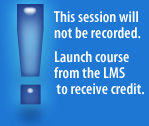
<style>
.page{position:relative;width:149px;height:126px;background:#1e77d3}
.page>*{position:absolute;margin:0}
.t1{font:16px/16px "MyriadPro-SemiboldCond";letter-spacing:0.005em;color:#ffffff}
</style>
<div class="page">
<p class="t1" style="left:54px;top:11px;width:90px;height:84px">This session will not be recorded.<br>Launch course<br>from the LMS<br> to receive credit.</p>
</div>
